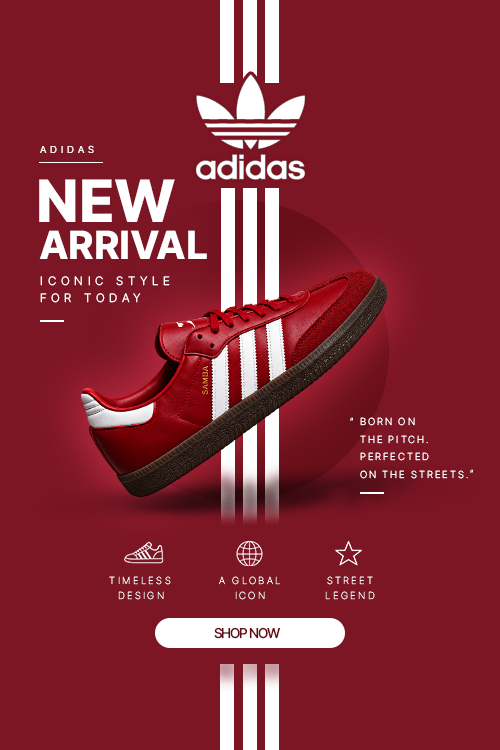
<style>
.page{position:relative;width:500px;height:750px;background:#7c1524}
.page>*{position:absolute;margin:0}
.t1{font:10px "Pretendard-Light";letter-spacing:0.4em;color:#ffffff}
.t2{font:60px "Pretendard-ExtraBold";color:#ffffff}
.t3{font:40px "Pretendard-ExtraBold";color:#ffffff}
.t4{font:12px "Pretendard-Light";letter-spacing:0.4em;color:#ffffff}
.t5{font:10px "Pretendard-ExtraLight";letter-spacing:0.2em;color:#ffffff}
.t6{font:10px "Pretendard-Thin";letter-spacing:0.24em;color:#ffffff}
.t7{font:14px "Pretendard-Medium";letter-spacing:-0.08em;color:#690a18}
</style>
<div class="page">
<p class="t1" style="left:40px;top:145px;width:54px;height:8px">ADIDAS</p>
<p class="t2" style="left:39px;top:179px;width:136px;height:43px">NEW</p>
<p class="t3" style="left:39px;top:230px;width:168px;height:29px">ARRIVAL</p>
<p class="t4" style="left:40px;top:276px;width:130px;height:10px">ICONIC STYLE</p>
<p class="t4" style="left:40px;top:293px;width:101px;height:10px">FOR TODAY</p>
<p class="t5" style="left:350px;top:417px;width:3px;height:4px">“</p>
<p class="t5" style="left:360px;top:417px;width:108px;height:62px">BORN ON<br>THE PITCH.<br>PERFECTED<br>ON THE STREETS.</p>
<p class="t5" style="left:470px;top:469px;width:3px;height:4px">“</p>
<p class="t6" style="left:109px;top:576px;width:62px;height:9px">TIMELESS</p>
<p class="t6" style="left:219px;top:576px;width:61px;height:9px">A GLOBAL</p>
<p class="t6" style="left:327px;top:576px;width:46px;height:9px">STREET</p>
<p class="t6" style="left:118px;top:591px;width:46px;height:9px">DESIGN</p>
<p class="t6" style="left:235px;top:591px;width:30px;height:9px">ICON</p>
<p class="t6" style="left:325px;top:591px;width:50px;height:9px">LEGEND</p>
<p class="t7" style="left:214px;top:627px;width:66px;height:12px">SHOP NOW</p>
</div>
